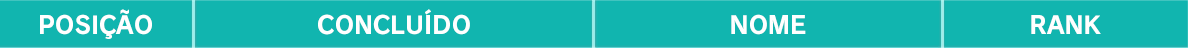
<style>
.page{position:relative;width:1188px;height:48px;background:#11b5af}
.page>*{position:absolute;margin:0}
.t1{font:24px "RodinPro-B";color:#ffffff}
</style>
<div class="page">
<p class="t1" style="left:40px;top:9px;width:112px;height:30px">POSIÇÃO</p>
<p class="t1" style="left:318px;top:9px;width:152px;height:26px">CONCLUÍDO</p>
<p class="t1" style="left:731px;top:14px;width:75px;height:21px">NOME</p>
<p class="t1" style="left:1031px;top:15px;width:70px;height:19px">RANK</p>
</div>
